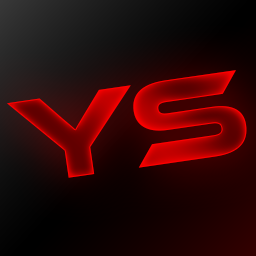
<style>
.page{position:relative;width:256px;height:256px}
.page>*{position:absolute;margin:0}
.t1{font:123.2px "EthnocentricRg-Regular"}
</style>
<div class="page">
<p class="t1" style="left:7px;top:70px;width:240px;height:108px;rotate:-8deg">ys</p>
</div>
